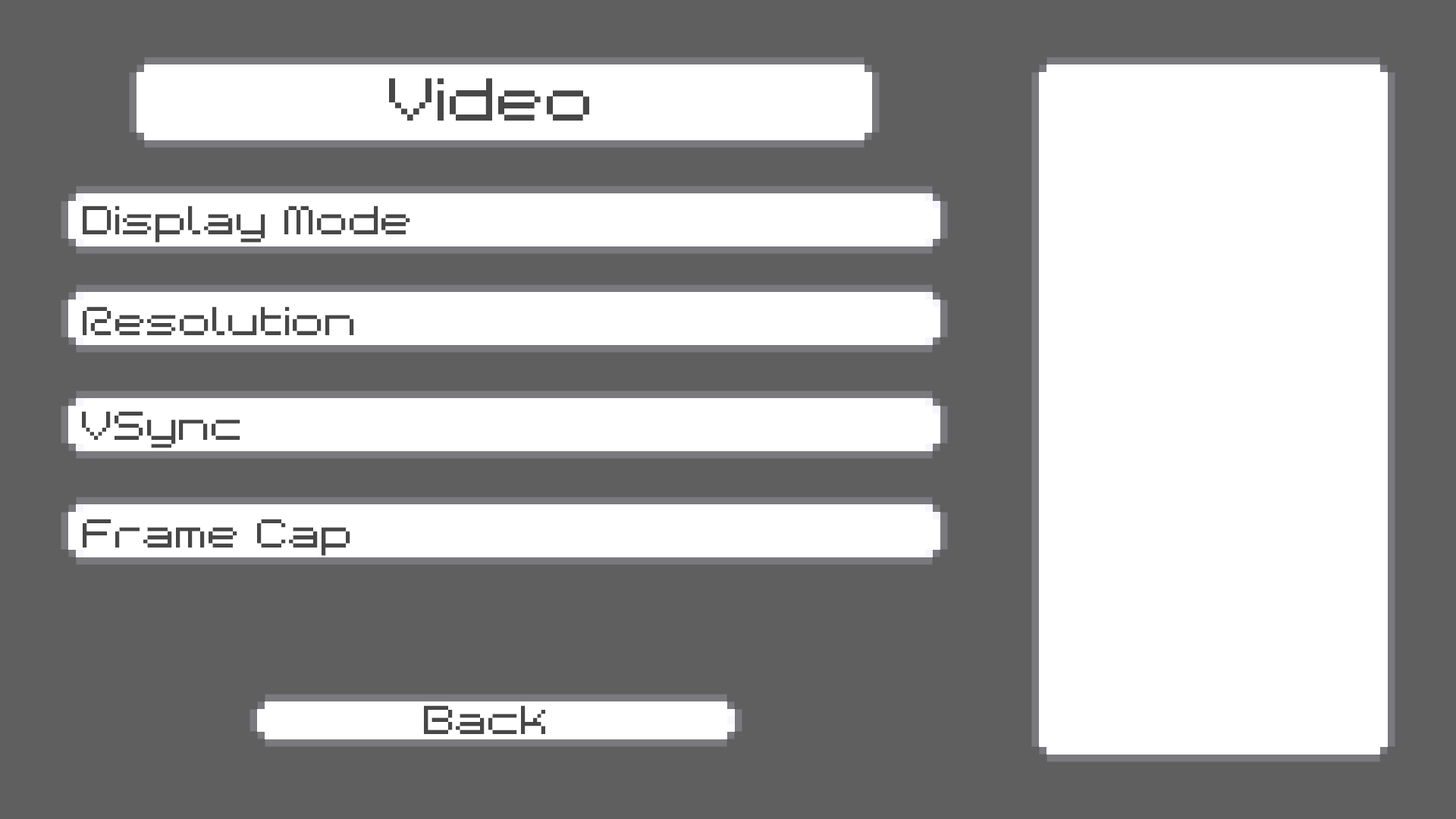
<style>
.page{position:relative;width:1456px;height:819px;background:#5f5f60}
.page>*{position:absolute;margin:0}
.t1{font:54.6px "BMspaceA9";color:#474748}
.t2{font:36.4px "BMspaceA9";color:#474748}
</style>
<div class="page">
<p class="t1" style="left:389px;top:78px;width:200px;height:43px">Video</p>
<p class="t2" style="left:83px;top:206px;width:327px;height:37px">Display Mode</p>
<p class="t2" style="left:83px;top:306px;width:271px;height:29px">Resolution</p>
<p class="t2" style="left:82px;top:411px;width:158px;height:37px">VSync</p>
<p class="t2" style="left:83px;top:519px;width:267px;height:37px">Frame Cap</p>
</div>
